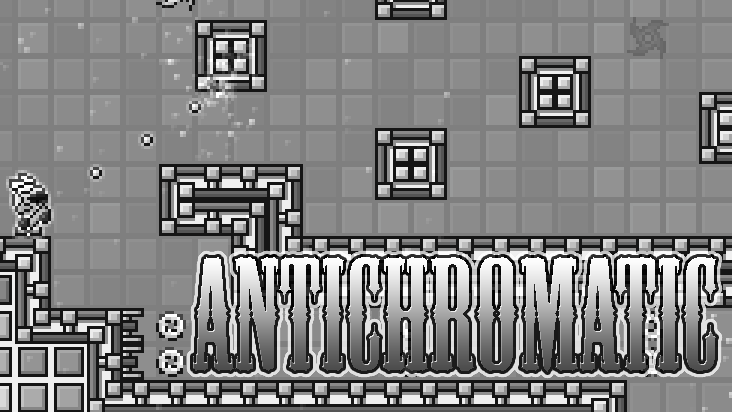
<style>
.page{position:relative;width:732px;height:412px}
.page>*{position:absolute;margin:0}
.t1{font:150px "MesquiteStd";letter-spacing:0.01em}
</style>
<div class="page">
<p class="t1" style="left:193px;top:257px;width:523px;height:115px">Antichromatic</p>
</div>
